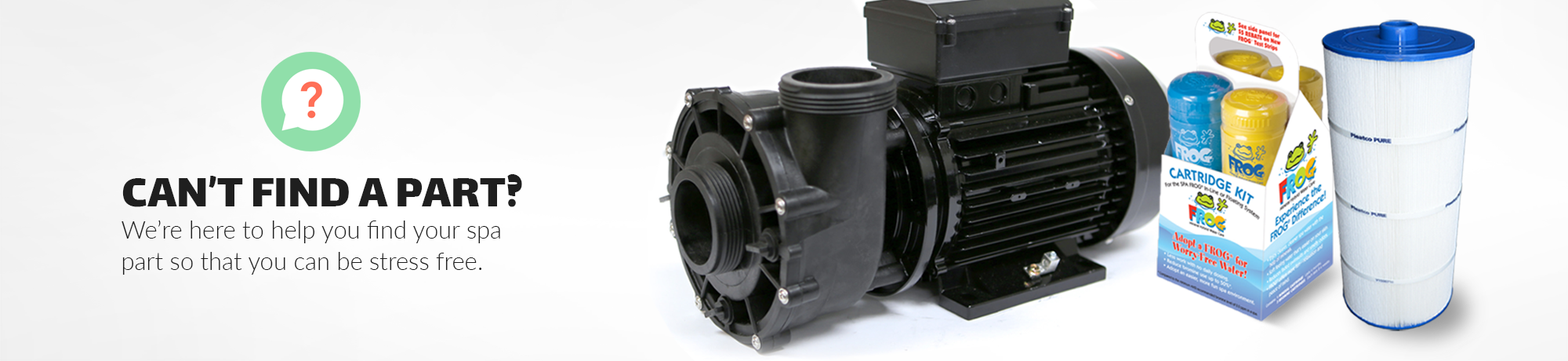
<style>
.page{position:relative;width:1568px;height:361px}
.page>*{position:absolute;margin:0}
.t1{font:49.6px "Lalezar-Regular";color:#1f1f1f}
.t2{font:24.3px/31.7px "Lato-Light";color:#1f1f1f}
</style>
<div class="page">
<p class="t1" style="left:122px;top:174px;width:400px;height:33px">CAN’T FIND A PART?</p>
<p class="t2" style="left:122px;top:220px;width:378px;height:54px">We’re here to help you find your spa <br>part so that you can be stress free.</p>
</div>
